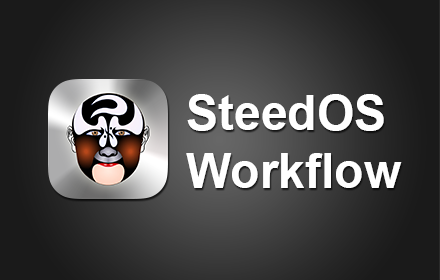
<style>
.page{position:relative;width:440px;height:280px}
.page>*{position:absolute;margin:0}
.t1{font:48px "Arial-BoldMT";color:#ffffff}
</style>
<div class="page">
<p class="t1" style="left:186px;top:94px;width:216px;height:94px">SteedOS<br>Workflow</p>
</div>
